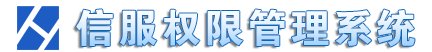
<style>
.page{position:relative;width:432px;height:52px;background:#ffffff}
.page>*{position:absolute;margin:0}
.t1{font:40px "FZDHTJW--GB1-0";letter-spacing:0.075em}
</style>
<div class="page">
<p class="t1" style="left:76px;top:9px;width:339px;height:38px">信服权限管理系统</p>
</div>
